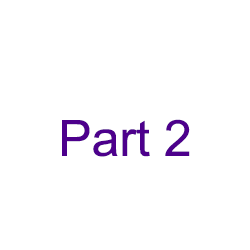
<style>
.page{position:relative;width:250px;height:250px;background:#ffffff}
.page>*{position:absolute;margin:0}
.t1{font:50px "ArialMT";color:#4d008c}
</style>
<div class="page">
<p class="t1" style="left:62px;top:119px;width:128px;height:38px">Part 2</p>
</div>
